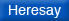
<style>
.page{position:relative;width:69px;height:21px;background:#0254b7}
.page>*{position:absolute;margin:0}
.t1{font:14px "Helvetica";letter-spacing:0.01em;color:#ffffff}
</style>
<div class="page">
<p class="t1" style="left:9px;top:5px;width:52px;height:13px">Heresay</p>
</div>
